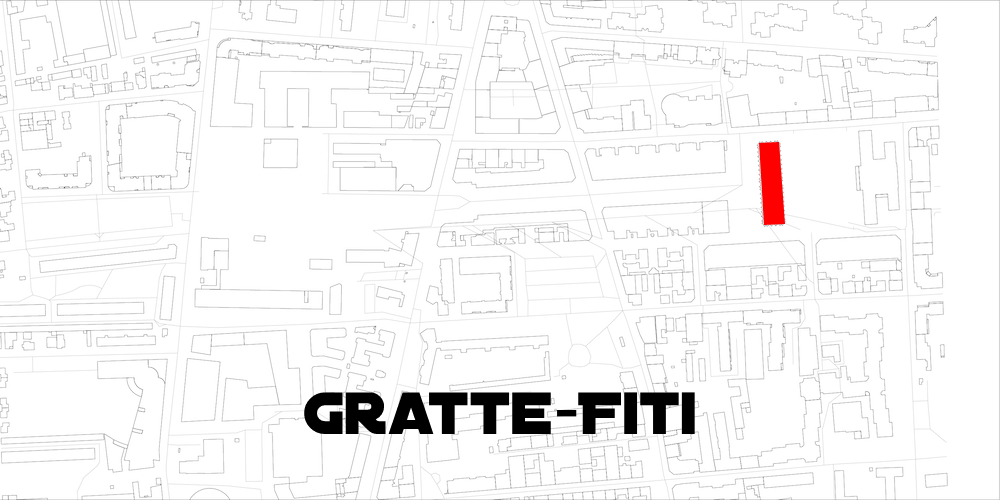
<style>
.page{position:relative;width:1000px;height:500px;background:#ffffff}
.page>*{position:absolute;margin:0}
.t1{font:64px "DistantGalaxy";color:#000000}
</style>
<div class="page">
<p class="t1" style="left:304px;top:392px;width:391px;height:42px">Gratte-Fiti</p>
</div>
